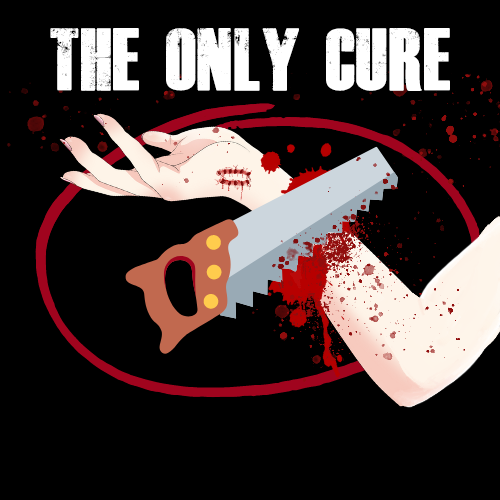
<style>
.page{position:relative;width:500px;height:500px;background:#000000}
.page>*{position:absolute;margin:0}
.t1{font:61.1px "DeadKansas";color:#ffffff;scale:0.93 1}
</style>
<div class="page">
<p class="t1" style="left:50px;top:28px;width:400px;height:63px">THE ONLY CURE</p>
</div>
